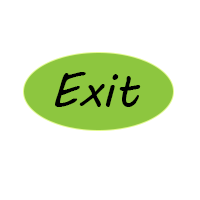
<style>
.page{position:relative;width:200px;height:200px;background:#ffffff}
.page>*{position:absolute;margin:0}
.t1{font:48px "MVBoli";color:#000000}
</style>
<div class="page">
<p class="t1" style="left:55px;top:72px;width:86px;height:35px">Exit</p>
</div>
